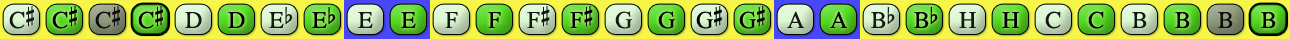
<style>
.page{position:relative;width:1290px;height:39px}
.page>*{position:absolute;margin:0}
.t1{font:24px "OpusChords";color:#000000}
.t2{font:24px "OpusChords";letter-spacing:-0.025em;color:#000000}
</style>
<div class="page">
<p class="t1" style="left:9px;top:6px;width:25px;height:23px;opacity:0.9">C#</p>
<p class="t1" style="left:52px;top:6px;width:25px;height:23px">C#</p>
<p class="t1" style="left:95px;top:6px;width:25px;height:23px;opacity:0.9">C#</p>
<p class="t1" style="left:138px;top:6px;width:25px;height:23px">C#</p>
<p class="t1" style="left:527px;top:6px;width:23px;height:22px;opacity:0.9">F#</p>
<p class="t1" style="left:570px;top:6px;width:23px;height:22px">F#</p>
<p class="t2" style="left:696px;top:6px;width:26px;height:23px">G#</p>
<p class="t2" style="left:739px;top:6px;width:26px;height:23px">G#</p>
<p class="t1" style="left:185px;top:12px;width:17px;height:16px;opacity:0.9">D</p>
<p class="t1" style="left:228px;top:12px;width:17px;height:16px">D</p>
<p class="t1" style="left:269px;top:7px;width:24px;height:21px;opacity:0.9">Eb</p>
<p class="t1" style="left:312px;top:7px;width:24px;height:21px">Eb</p>
<p class="t1" style="left:358px;top:12px;width:15px;height:16px;opacity:0.9">E</p>
<p class="t1" style="left:401px;top:12px;width:15px;height:16px">E</p>
<p class="t1" style="left:445px;top:12px;width:13px;height:16px;opacity:0.9">F</p>
<p class="t1" style="left:488px;top:12px;width:13px;height:16px">F</p>
<p class="t1" style="left:615px;top:11px;width:17px;height:18px;opacity:0.9">G</p>
<p class="t1" style="left:658px;top:11px;width:17px;height:18px">G</p>
<p class="t1" style="left:787px;top:11px;width:17px;height:17px;opacity:0.9">A</p>
<p class="t1" style="left:830px;top:11px;width:17px;height:17px">A</p>
<p class="t1" style="left:871px;top:7px;width:24px;height:21px;opacity:0.9">Bb</p>
<p class="t1" style="left:914px;top:7px;width:24px;height:21px">Bb</p>
<p class="t1" style="left:959px;top:12px;width:17px;height:16px;opacity:0.9">H</p>
<p class="t1" style="left:1002px;top:12px;width:17px;height:16px">H</p>
<p class="t1" style="left:1045px;top:11px;width:16px;height:18px;opacity:0.9">C</p>
<p class="t1" style="left:1088px;top:11px;width:16px;height:18px">C</p>
<p class="t1" style="left:1132px;top:12px;width:15px;height:16px;opacity:0.9">B</p>
<p class="t1" style="left:1175px;top:12px;width:15px;height:16px">B</p>
<p class="t1" style="left:1218px;top:12px;width:15px;height:16px;opacity:0.9">B</p>
<p class="t1" style="left:1261px;top:12px;width:15px;height:16px">B</p>
</div>
